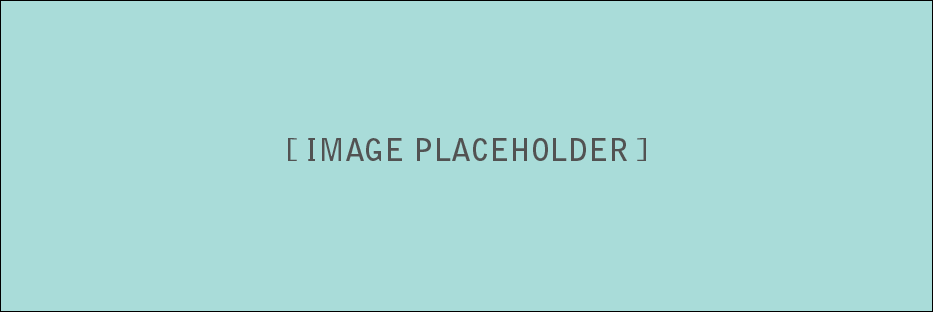
<style>
.page{position:relative;width:933px;height:312px;background:#a9dcd9}
.page>*{position:absolute;margin:0}
.t1{font:30px "BellGothicStd-Bold";color:#525252}
</style>
<div class="page">
<p class="t1" style="left:288px;top:138px;width:358px;height:23px">[ IMAGE PLACEHOLDER ]</p>
</div>
